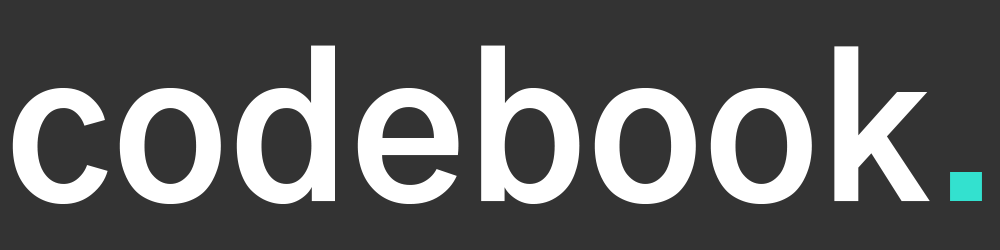
<style>
.page{position:relative;width:1000px;height:250px;background:#333333}
.page>*{position:absolute;margin:0}
.t1{font:193.9px "GothicA1-Bold";letter-spacing:0.01em;color:#ffffff}
.t2{font:193.9px "GothicA1-Bold";letter-spacing:0.01em;color:#33e1cf}
</style>
<div class="page">
<p class="t1" style="left:12px;top:45px;width:970px;height:159px">codebook<span class="t2">.</span></p>
</div>
